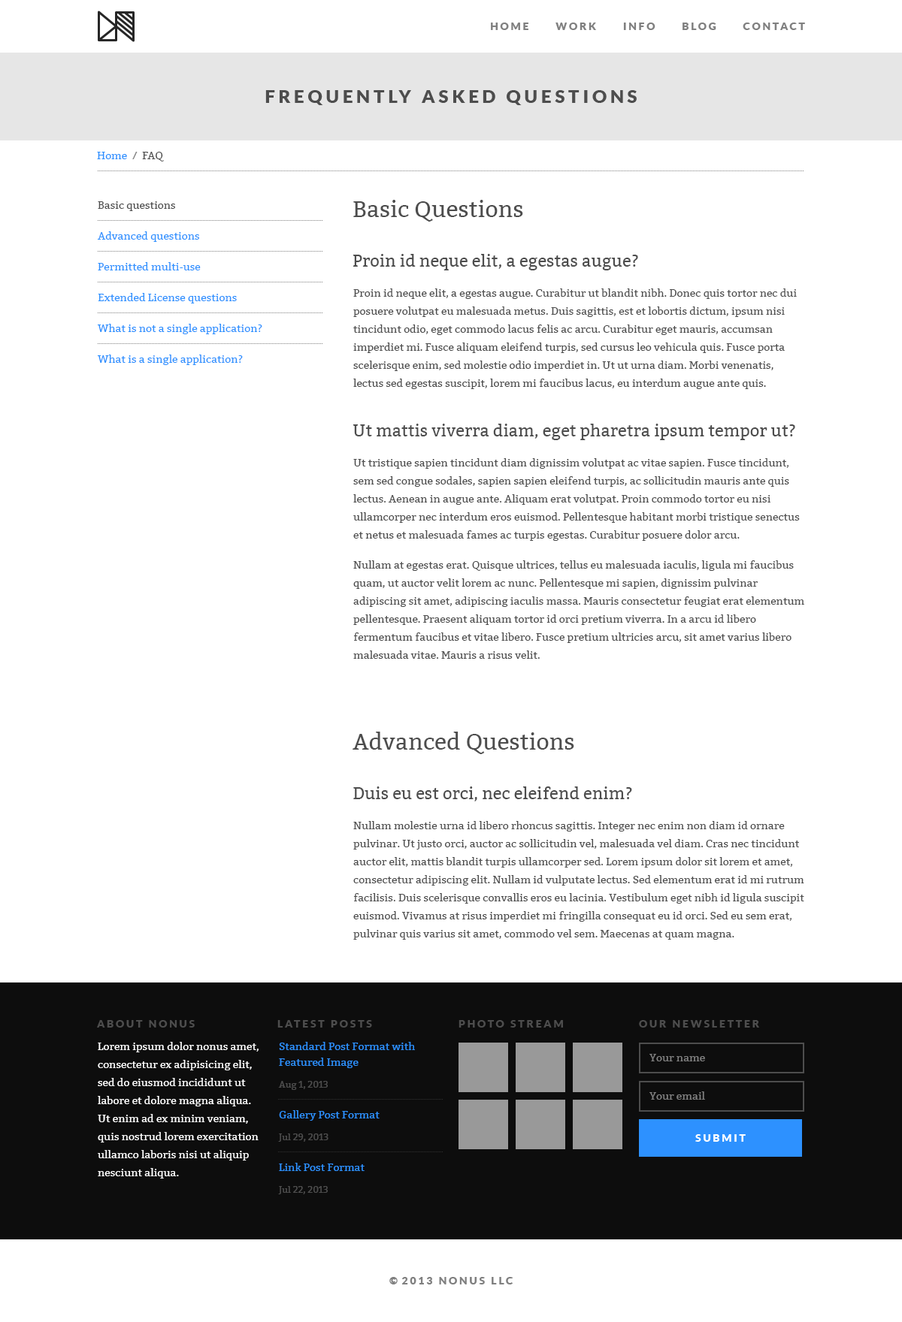
<style>
.page{position:relative;width:902px;height:1322px;background:#ffffff}
.page>*{position:absolute;margin:0}
.t1{font:10.5px "Lato-Black";letter-spacing:0.2em;color:#808080;text-transform:uppercase}
.t2{font:18px "Lato-Black";letter-spacing:0.2em;color:#4d4d4d;text-transform:uppercase}
.t3{font:10.5px "Bitter-Regular";color:#2d91ff}
.t4{font:10.5px "Bitter-Regular";color:#808080}
.t5{font:10.5px "Bitter-Regular";color:#4d4d4d}
.t6{font:10.5px/30.8px "Bitter-Regular";color:#2d91ff}
.t7{font:10.5px/30.8px "Bitter-Regular";color:#4d4d4d}
.t8{font:22.5px "Bitter-Regular";color:#4d4d4d}
.t9{font:16.5px "Bitter-Regular";color:#4d4d4d}
.t10{font:10.5px/18px "Bitter-Regular";color:#4d4d4d}
.t11{font:10.5px/30.1px "Bitter-Regular";color:#4d4d4d}
.t12{font:10.5px "Lato-Black";letter-spacing:0.2em;color:#4d4d4d;text-transform:uppercase}
.t13{font:10.5px/18px "Bitter-Regular";color:#ffffff}
.t14{font:10.5px/15.8px "Bitter-Regular";color:#2d91ff}
.t15{font:9px/21.8px "Bitter-Regular";color:#4d4d4d}
.t16{font:10.5px "Lato-Black";letter-spacing:0.2em;color:#ffffff;text-transform:uppercase}
</style>
<div class="page">
<p class="t1" style="left:491px;top:23px;width:314px;height:7px">Home      Work      Info      Blog      Contact</p>
<p class="t2" style="left:265px;top:90px;width:371px;height:15px">Frequently Asked Questions</p>
<p class="t3" style="left:97px;top:152px;width:67px;height:10px">Home <span class="t4"> /  </span><span class="t5">FAQ</span></p>
<p class="t6" style="left:97px;top:201px;width:165px;height:164px"><span class="t7">Basic questions<br></span>Advanced questions<br>Permitted multi-use<br>Extended License questions<br>What is not a single application?<br>What is a single application?</p>
<p class="t8" style="left:353px;top:200px;width:170px;height:22px">Basic Questions</p>
<p class="t9" style="left:352px;top:254px;width:286px;height:17px">Proin id neque elit, a egestas augue?</p>
<p class="t10" style="left:353px;top:289px;width:443px;height:100px">Proin id neque elit, a egestas augue. Curabitur ut blandit nibh. Donec quis tortor nec dui posuere volutpat eu malesuada metus. Duis sagittis, est et lobortis dictum, ipsum nisi tincidunt odio, eget commodo lacus felis ac arcu. Curabitur eget mauris, accumsan imperdiet mi. Fusce aliquam eleifend turpis, sed cursus leo vehicula quis. Fusce porta scelerisque enim, sed molestie odio imperdiet in. Ut ut urna diam. Morbi venenatis, lectus sed egestas suscipit, lorem mi faucibus lacus, eu interdum augue ante quis.</p>
<p class="t9" style="left:352px;top:424px;width:443px;height:16px">Ut mattis viverra diam, eget pharetra ipsum tempor ut?</p>
<p class="t10" style="left:353px;top:458px;width:451px;height:201px">Ut tristique sapien tincidunt diam dignissim volutpat ac vitae sapien. Fusce tincidunt, sem sed congue sodales, sapien sapien eleifend turpis, ac sollicitudin mauris ante quis lectus. Aenean in augue ante. Aliquam erat volutpat. Proin commodo tortor eu nisi ullamcorper nec interdum eros euismod. Pellentesque habitant morbi tristique senectus et netus et malesuada fames ac turpis egestas. Curabitur posuere dolor arcu.<br><span class="t11">Nullam at egestas erat. Quisque ultrices, tellus eu malesuada iaculis, ligula mi faucibus </span>quam, ut auctor velit lorem ac nunc. Pellentesque mi sapien, dignissim pulvinar adipiscing sit amet, adipiscing iaculis massa. Mauris consectetur feugiat erat elementum pellentesque. Praesent aliquam tortor id orci pretium viverra. In a arcu id libero fermentum faucibus et vitae libero. Fusce pretium ultricies arcu, sit amet varius libero malesuada vitae. Mauris a risus velit.</p>
<p class="t8" style="left:352px;top:732px;width:222px;height:22px">Advanced Questions</p>
<p class="t9" style="left:353px;top:787px;width:279px;height:15px">Duis eu est orci, nec eleifend enim?</p>
<p class="t10" style="left:353px;top:821px;width:451px;height:119px">Nullam molestie urna id libero rhoncus sagittis. Integer nec enim non diam id ornare pulvinar. Ut justo orci, auctor ac sollicitudin vel, malesuada vel diam. Cras nec tincidunt auctor elit, mattis blandit turpis ullamcorper sed. Lorem ipsum dolor sit lorem et amet, consectetur adipiscing elit. Nullam id vulputate lectus. Sed elementum erat id mi rutrum facilisis. Duis scelerisque convallis eros eu lacinia. Vestibulum eget nibh id ligula suscipit euismod. Vivamus at risus imperdiet mi fringilla consequat eu id orci. Sed eu sem erat, pulvinar quis varius sit amet, commodo vel sem. Maecenas at quam magna.</p>
<p class="t12" style="left:97px;top:1020px;width:98px;height:8px">About Nonus</p>
<p class="t12" style="left:277px;top:1020px;width:95px;height:8px">Latest Posts</p>
<p class="t12" style="left:458px;top:1020px;width:105px;height:8px">Photo Stream</p>
<p class="t12" style="left:639px;top:1020px;width:120px;height:8px">Our Newsletter</p>
<p class="t13" style="left:98px;top:1042px;width:160px;height:137px">Lorem ipsum dolor nonus amet, consectetur ex adipisicing elit, sed do eiusmod incididunt ut labore et dolore magna aliqua. Ut enim ad ex minim veniam, quis nostrud lorem exercitation ullamco laboris nisi ut aliquip nesciunt aliqua.</p>
<p class="t14" style="left:278px;top:1042px;width:137px;height:48px">Standard Post Format with Featured Image<br><span class="t15">Aug 1, 2013</span></p>
<p class="t4" style="left:649px;top:1054px;width:56px;height:8px">Your name</p>
<p class="t4" style="left:649px;top:1092px;width:56px;height:8px">Your email</p>
<p class="t14" style="left:278px;top:1111px;width:101px;height:31px">Gallery Post Format<br><span class="t15">Jul 29, 2013</span></p>
<p class="t16" style="left:695px;top:1135px;width:50px;height:7px">Submit</p>
<p class="t14" style="left:278px;top:1163px;width:86px;height:32px">Link Post Format<br><span class="t15">Jul 22, 2013</span></p>
<p class="t1" style="left:389px;top:1277px;width:124px;height:8px">© 2013 Nonus LLC</p>
</div>
